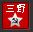
<style>
.page{position:relative;width:33px;height:32px;background:#c50000}
.page>*{position:absolute;margin:0}
.t1{font:10.4px "SimSun";color:#ffffff}
</style>
<div class="page">
<p class="t1" style="left:6px;top:4px;width:19px;height:9px">三野</p>
</div>
